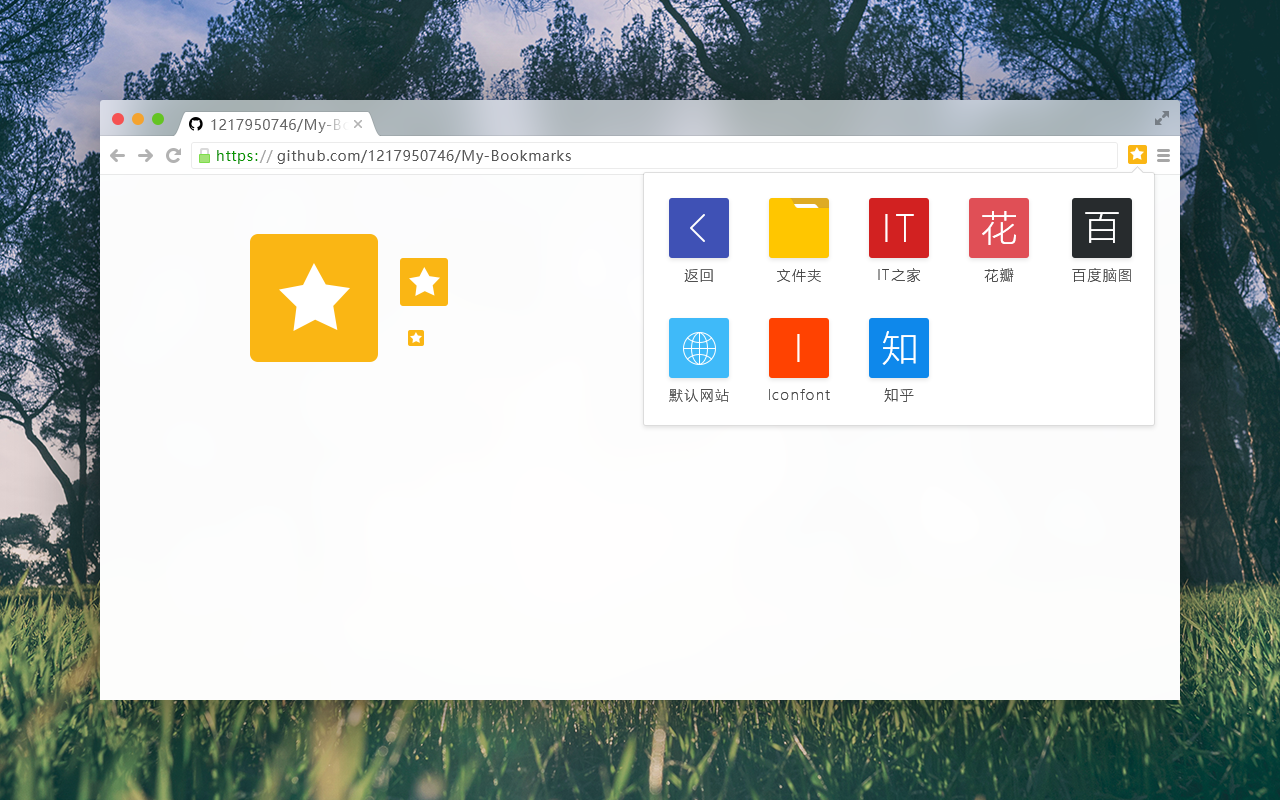
<style>
.page{position:relative;width:1280px;height:800px}
.page>*{position:absolute;margin:0}
.t1{font:36px "MicrosoftYaHeiLight";letter-spacing:0.1em;color:#ffffff}
.t2{font:14px "MicrosoftYaHeiLight";letter-spacing:0.1em}
.t3{font:14px "MicrosoftYaHeiLight";letter-spacing:0.1em;color:#434343}
</style>
<div class="page">
<p class="t1" style="left:885px;top:214px;width:29px;height:28px">IT</p>
<p class="t1" style="left:982px;top:211px;width:34px;height:34px">花</p>
<p class="t1" style="left:1085px;top:212px;width:34px;height:31px">百</p>
<p class="t2" style="left:684px;top:269px;width:29px;height:13px">返回</p>
<p class="t3" style="left:777px;top:269px;width:44px;height:13px">文件夹</p>
<p class="t3" style="left:878px;top:268px;width:43px;height:14px">IT之家</p>
<p class="t3" style="left:984px;top:268px;width:30px;height:14px">花瓣</p>
<p class="t3" style="left:1072px;top:268px;width:59px;height:14px">百度脑图</p>
<p class="t1" style="left:797px;top:334px;width:3px;height:28px">I</p>
<p class="t1" style="left:882px;top:331px;width:34px;height:34px">知</p>
<p class="t3" style="left:669px;top:389px;width:60px;height:13px">默认网站</p>
<p class="t3" style="left:769px;top:389px;width:61px;height:11px">Iconfont</p>
<p class="t3" style="left:884px;top:388px;width:30px;height:14px">知乎</p>
</div>
